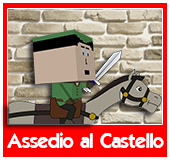
<style>
.page{position:relative;width:170px;height:160px;background:#ff0000}
.page>*{position:absolute;margin:0}
.t1{font:20px "ELEGANCE";color:#ffffff}
</style>
<div class="page">
<p class="t1" style="left:7px;top:132px;width:157px;height:16px">Assedio al Castello</p>
</div>
